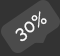
<style>
.page{position:relative;width:60px;height:56px;background:#4b4b4b}
.page>*{position:absolute;margin:0}
.t1{font:30px "Raleway-Regular";letter-spacing:0.01em;color:#f9f9f9;font-weight:bold}
</style>
<div class="page">
<p class="t1" style="left:15px;top:11px;width:32px;height:31px;rotate:-34deg">30%</p>
</div>
